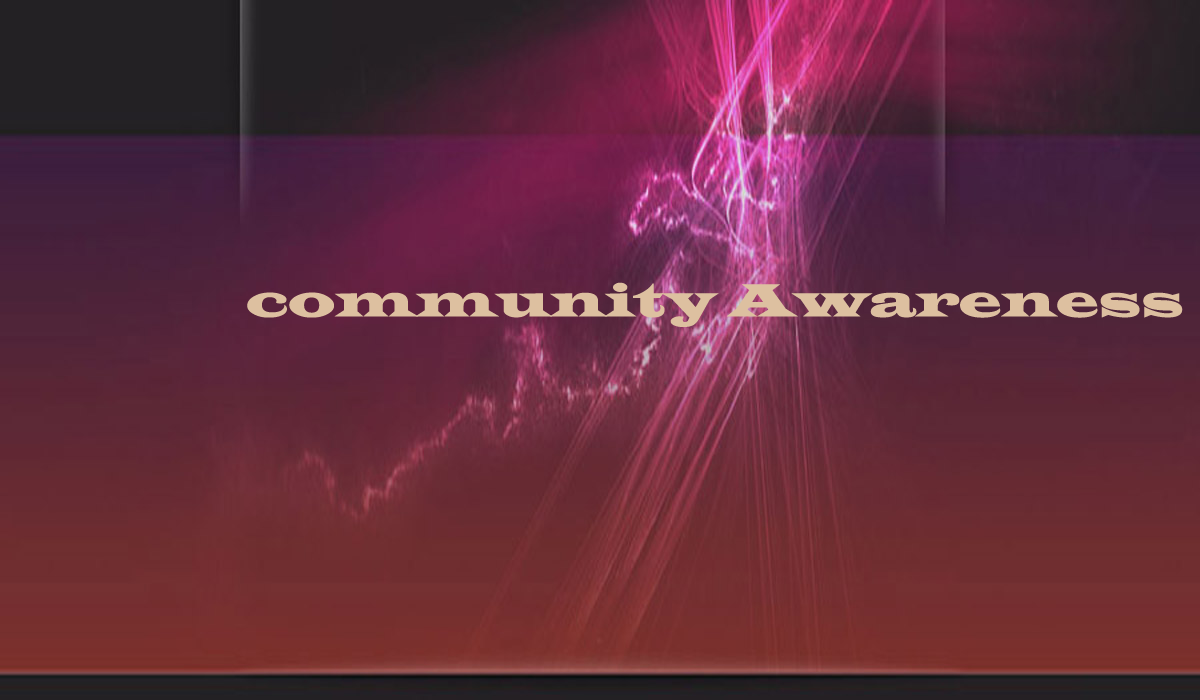
<style>
.page{position:relative;width:1200px;height:700px}
.page>*{position:absolute;margin:0}
.t1{font:48px "LatinWide";color:#ddc0a0}
</style>
<div class="page">
<p class="t1" style="left:247px;top:282px;width:936px;height:45px">community Awareness</p>
</div>
